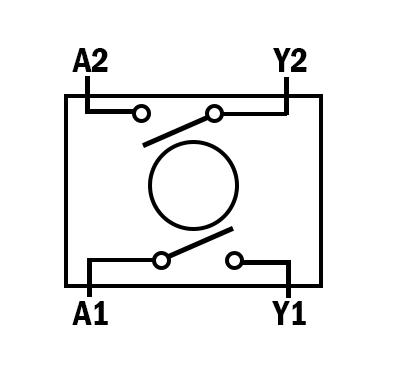
<style>
.page{position:relative;width:402px;height:372px;background:#ffffff}
.page>*{position:absolute;margin:0}
.t1{font:36px "FranklinGothic-DemiCond";color:#000000}
</style>
<div class="page">
<p class="t1" style="left:72px;top:48px;width:36px;height:24px">A2</p>
<p class="t1" style="left:273px;top:48px;width:34px;height:24px">Y2</p>
<p class="t1" style="left:72px;top:301px;width:36px;height:24px">A1</p>
<p class="t1" style="left:272px;top:301px;width:34px;height:24px">Y1</p>
</div>
